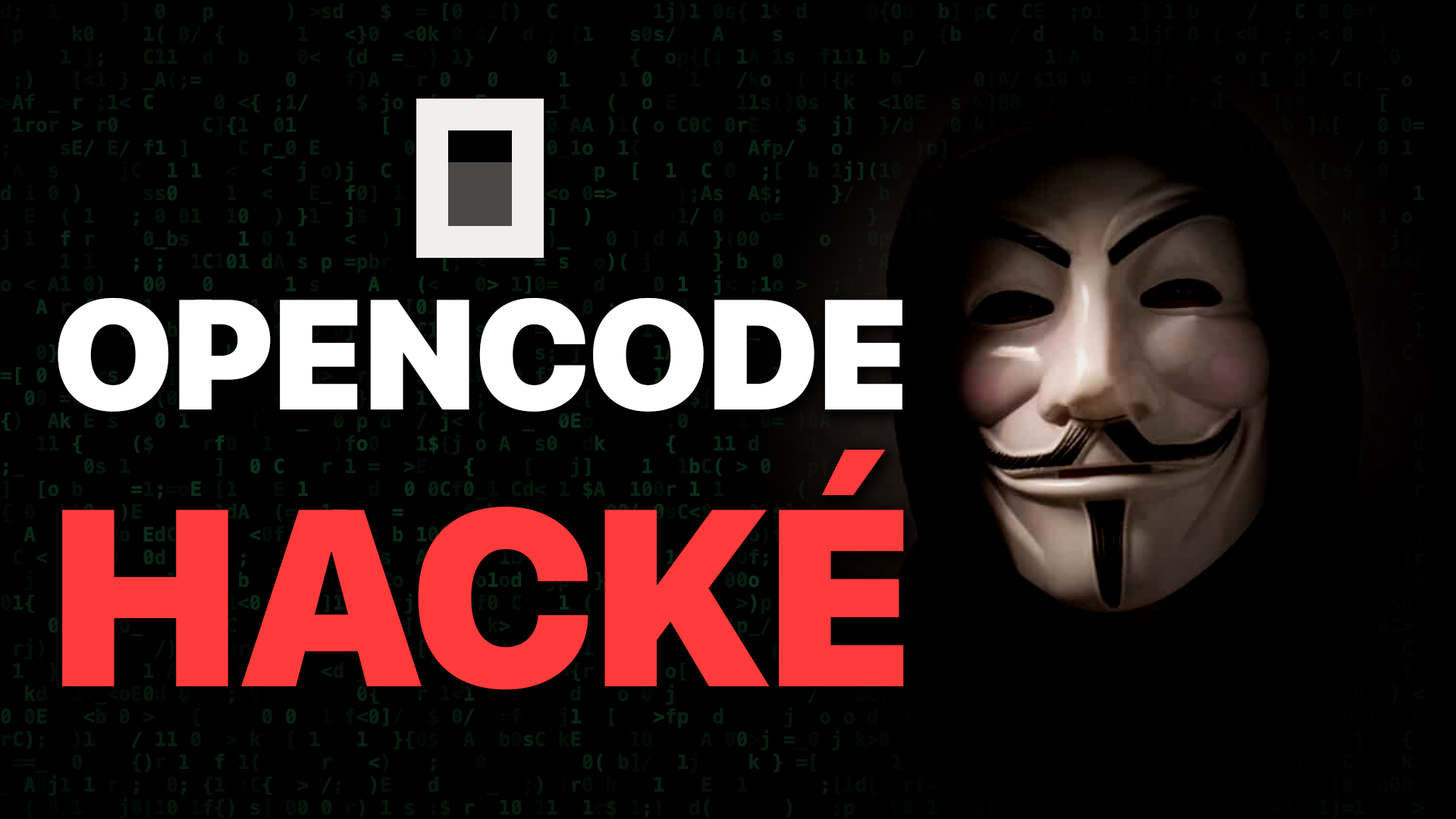
<style>
.page{position:relative;width:1456px;height:819px;background:#000000}
.page>*{position:absolute;margin:0}
.t1{font:155.5px ".SFNS-Regular";letter-spacing:-0.01em;color:#ffffff}
.t2{font:250.2px ".SFNS-Regular";letter-spacing:-0.01em;color:#ff3b3b}
</style>
<div class="page">
<p class="t1" style="left:57px;top:297px;width:846px;height:116px">OPENCODE</p>
<p class="t2" style="left:61px;top:450px;width:844px;height:241px">HACKÉ</p>
</div>
